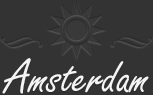
<style>
.page{position:relative;width:153px;height:95px;background:#333333}
.page>*{position:absolute;margin:0}
.t1{font:52px "FreestyleScript-Regular";color:#f4f4f4}
</style>
<div class="page">
<p class="t1" style="left:2px;top:58px;width:147px;height:36px">Amsterdam</p>
</div>
